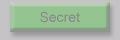
<style>
.page{position:relative;width:120px;height:40px;background:#94c591}
.page>*{position:absolute;margin:0}
.t1{font:14px "ArialMT";color:#8b898b}
</style>
<div class="page">
<p class="t1" style="left:40px;top:11px;width:40px;height:12px">Secret</p>
</div>
